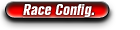
<style>
.page{position:relative;width:140px;height:30px;background:#ffffff}
.page>*{position:absolute;margin:0}
.t1{font:14px "ARubricaCnBoldItalic";color:#ffffff}
</style>
<div class="page">
<p class="t1" style="left:23px;top:4px;width:72px;height:13px">Race Config.</p>
</div>
